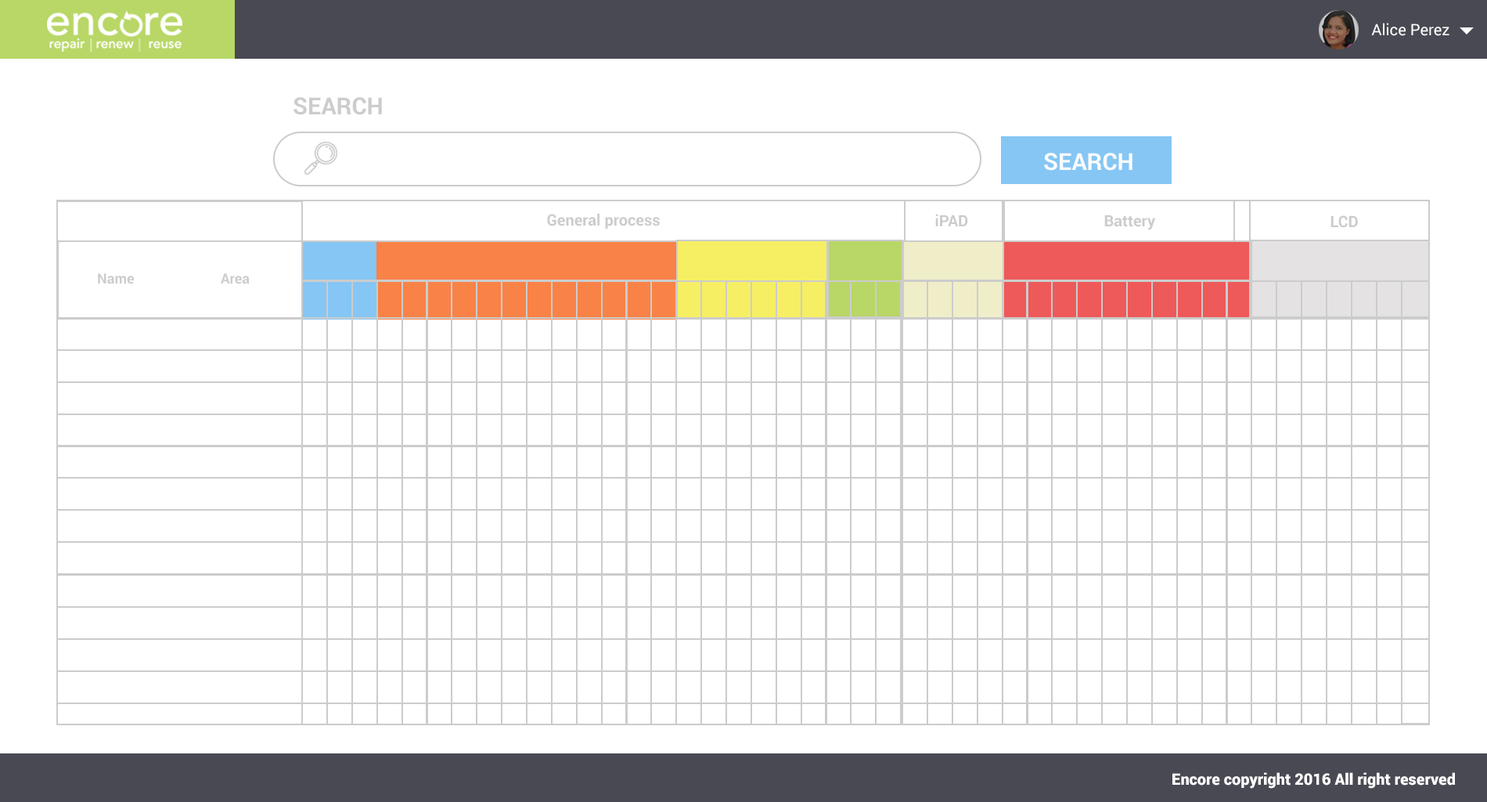
<style>
.page{position:relative;width:1487px;height:802px;background:#ffffff}
.page>*{position:absolute;margin:0}
.t1{font:15.7px "Roboto-Regular";color:#fffefe}
.t2{font:23.5px "Roboto-Bold";color:#cccccc}
.t3{font:23.5px "Roboto-Bold";color:#f9fbfc}
.t4{font:15.7px "Roboto-Bold";color:#cccccc}
.t5{font:14.1px "Roboto-Bold";color:#cccccc}
.t6{font:15.7px "Roboto-Black";color:#ffffff}
</style>
<div class="page">
<p class="t1" style="left:1372px;top:23px;width:78px;height:13px">Alice Perez</p>
<p class="t2" style="left:294px;top:97px;width:88px;height:18px">SEARCH</p>
<p class="t3" style="left:1044px;top:153px;width:89px;height:18px">SEARCH</p>
<p class="t4" style="left:547px;top:213px;width:113px;height:16px">General process</p>
<p class="t4" style="left:936px;top:214px;width:32px;height:12px">iPAD</p>
<p class="t4" style="left:1105px;top:215px;width:51px;height:15px">Battery</p>
<p class="t4" style="left:1331px;top:215px;width:27px;height:13px">LCD</p>
<p class="t5" style="left:98px;top:273px;width:36px;height:11px">Name</p>
<p class="t5" style="left:221px;top:273px;width:29px;height:11px">Area</p>
<p class="t6" style="left:1173px;top:772px;width:282px;height:16px">Encore copyright 2016 All right reserved</p>
</div>
